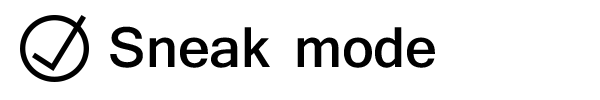
<style>
.page{position:relative;width:600px;height:100px;background:#ffffff}
.page>*{position:absolute;margin:0}
.t1{font:60px "Shruti-Bold";color:#000000}
</style>
<div class="page">
<p class="t1" style="left:110px;top:26px;width:325px;height:42px">Sneak mode</p>
</div>
